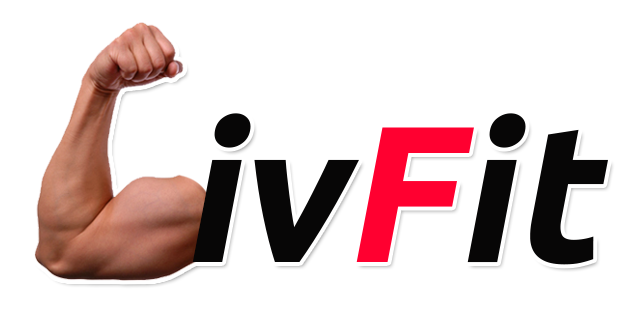
<style>
.page{position:relative;width:644px;height:311px;background:#ffffff}
.page>*{position:absolute;margin:0}
.t1{font:197.3px "Ubuntu-Bold";color:#070606}
.t2{font:197.3px "Ubuntu-Bold";color:#ff0030}
</style>
<div class="page">
<p class="t1" style="left:192px;top:113px;width:416px;height:152px">iv<span class="t2">F</span>it</p>
</div>
